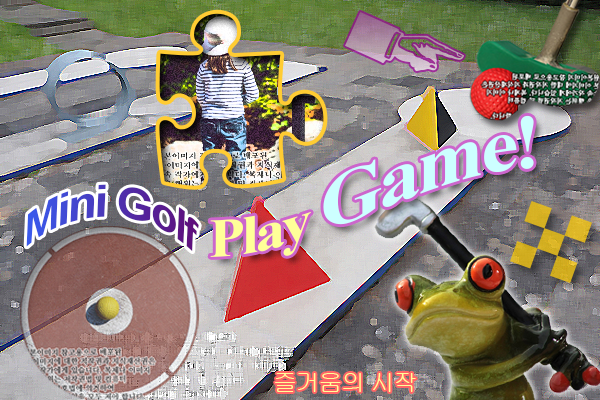
<style>
.page{position:relative;width:600px;height:400px}
.page>*{position:absolute;margin:0}
.t1{font:76.8px/52.7px "TimesNewRomanPS-BoldMT";letter-spacing:-0.05em;color:#ccffff;scale:1.07 1}
.t2{font:54.9px/52.7px "TimesNewRomanPS-BoldMT";letter-spacing:-0.05em;color:#ffff99;scale:1.07 1}
.t3{font:44.5px "Arial-BoldMT";letter-spacing:-0.05em}
.t4{font:23.9px "Gulim";letter-spacing:-0.05em;color:#ffff99}
</style>
<div class="page">
<p class="t1" style="left:210px;top:115px;width:324px;height:142px"><span class="t2">Play </span>Game!</p>
<p class="t3" style="left:26px;top:184px;width:173px;height:68px;rotate:3deg">Mini Golf</p>
<p class="t4" style="left:275px;top:373px;width:141px;height:19px">즐거움의 시작</p>
</div>
